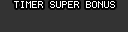
<style>
.page{position:relative;width:128px;height:32px;background:#333333}
.page>*{position:absolute;margin:0}
.t1{font:8.2px "Terminal";color:#ffffff}
</style>
<div class="page">
<p class="t1" style="left:14px;top:1px;width:101px;height:7px">TIMER SUPER BONUS</p>
</div>
